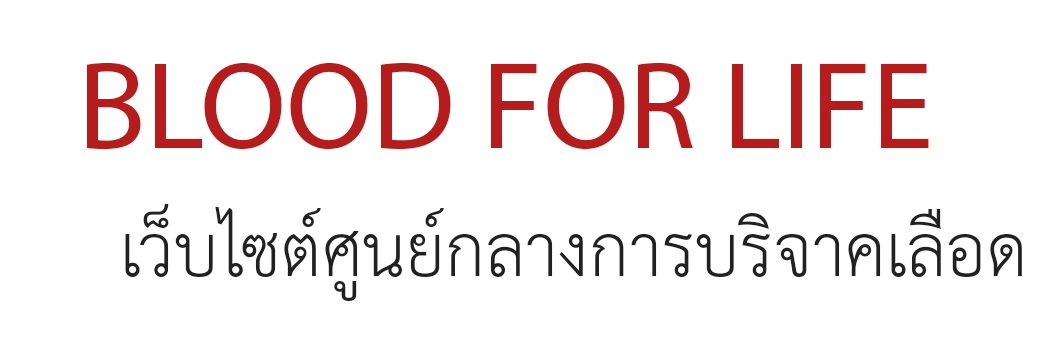
<style>
.page{position:relative;width:1050px;height:350px;background:#ffffff}
.page>*{position:absolute;margin:0}
.t1{font:125px "MyriadPro-Regular";color:#b71c1c}
.t2{font:104.2px "THSarabunPSK";color:#212121}
</style>
<div class="page">
<p class="t1" style="left:87px;top:62px;width:842px;height:88px">BLOOD FOR LIFE</p>
<p class="t2" style="left:125px;top:204px;width:897px;height:97px">เว็บไซต์ศูนย์กลางการบริจาคเลือด</p>
</div>
